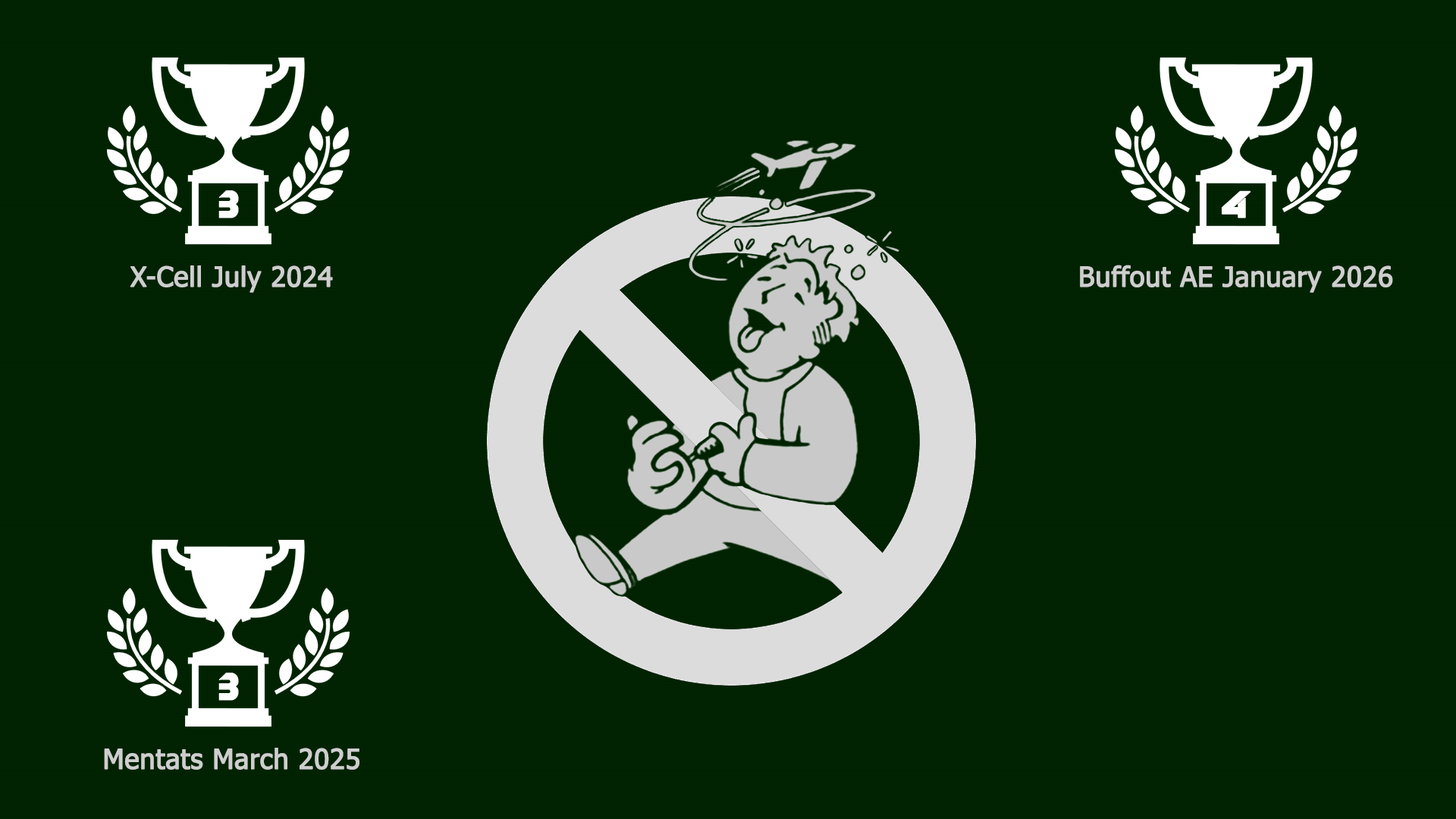
<style>
.page{position:relative;width:1456px;height:819px;background:#012201}
.page>*{position:absolute;margin:0}
.t1{font:27.3px "Tahoma";color:#cecece;font-weight:bold}
</style>
<div class="page">
<p class="t1" style="left:130px;top:265px;width:203px;height:28px">X-Cell July 2024</p>
<p class="t1" style="left:1080px;top:265px;width:313px;height:28px">Buffout AE January 2026</p>
<p class="t1" style="left:104px;top:748px;width:255px;height:22px">Mentats March 2025</p>
</div>
